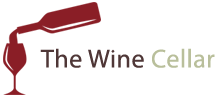
<style>
.page{position:relative;width:217px;height:100px;background:#ffffff}
.page>*{position:absolute;margin:0}
.t1{font:26px "MyriadPro-Regular";letter-spacing:0.02em;color:#4f3737}
.t2{font:26px "MyriadPro-Regular";letter-spacing:0.02em;color:#b9bf9b}
</style>
<div class="page">
<p class="t1" style="left:40px;top:48px;width:175px;height:20px">The Wine <span class="t2">Cellar</span></p>
</div>
